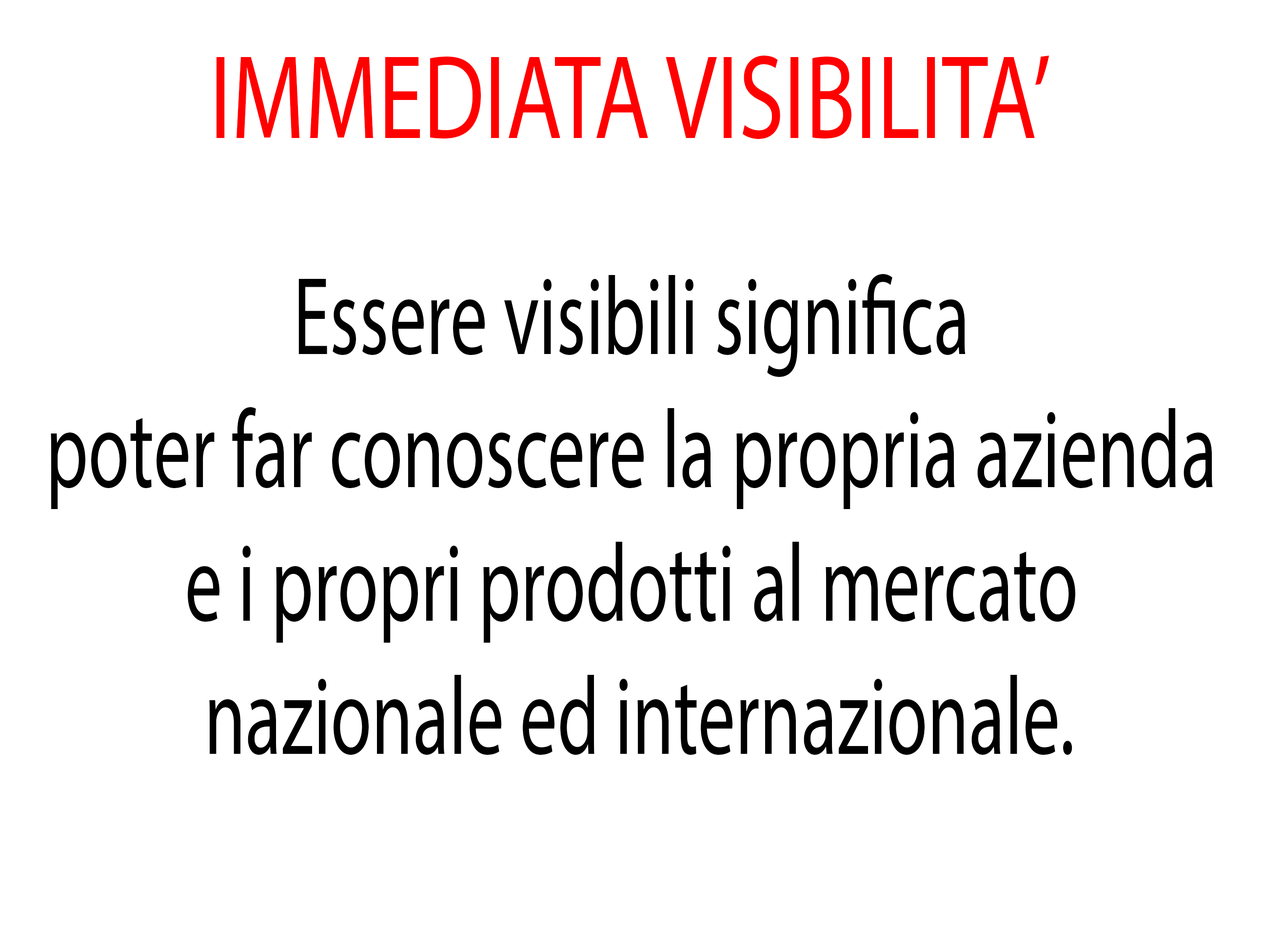
<style>
.page{position:relative;width:1264px;height:944px;background:#ffffff}
.page>*{position:absolute;margin:0}
.t1{font:120.1px "MyriadPro-Regular";color:#ff0000;scale:0.76 1}
.t2{font:111.1px "MyriadPro-Regular";color:#000000;scale:0.67 1}
</style>
<div class="page">
<p class="t1" style="left:216px;top:56px;width:833px;height:83px">IMMEDIATA VISIBILITA’</p>
<p class="t2" style="left:51px;top:274px;width:1161px;height:481px;text-align:center">Essere visibili significa <br>poter far conoscere la propria azienda <br>e i propri prodotti al mercato <br>nazionale ed internazionale.</p>
</div>
